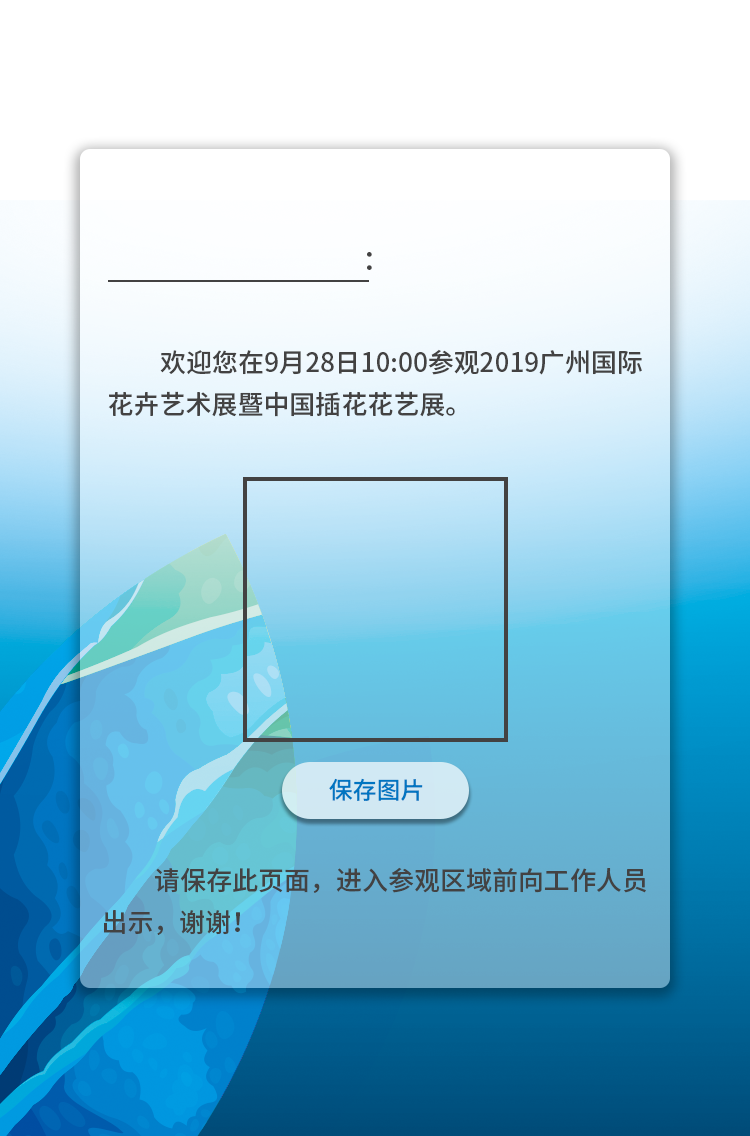
<style>
.page{position:relative;width:750px;height:1136px}
.page>*{position:absolute;margin:0}
.t1{font:28px "SourceHanSansCN-Medium";color:#434242}
.t2{font:26px/42px "SourceHanSansCN-Medium";color:#434242}
.t3{font:24px "SourceHanSansCN-Medium";color:#0075c1}
</style>
<div class="page">
<p class="t1" style="left:367px;top:252px;width:5px;height:18px">：</p>
<p class="t2" style="left:108px;top:349px;width:534px;height:68px">欢迎您在9月28日10:00参观2019广州国际<br>花卉艺术展暨中国插花花艺展。</p>
<p class="t3" style="left:329px;top:778px;width:94px;height:23px">保存图片</p>
<p class="t2" style="left:104px;top:867px;width:542px;height:68px">请保存此页面，进入参观区域前向工作人员<br>出示，谢谢！</p>
</div>
